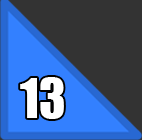
<style>
.page{position:relative;width:142px;height:140px;background:#333333}
.page>*{position:absolute;margin:0}
.t1{font:50px "Impact";color:#ffffff}
</style>
<div class="page">
<p class="t1" style="left:20px;top:77px;width:44px;height:42px">13</p>
</div>
